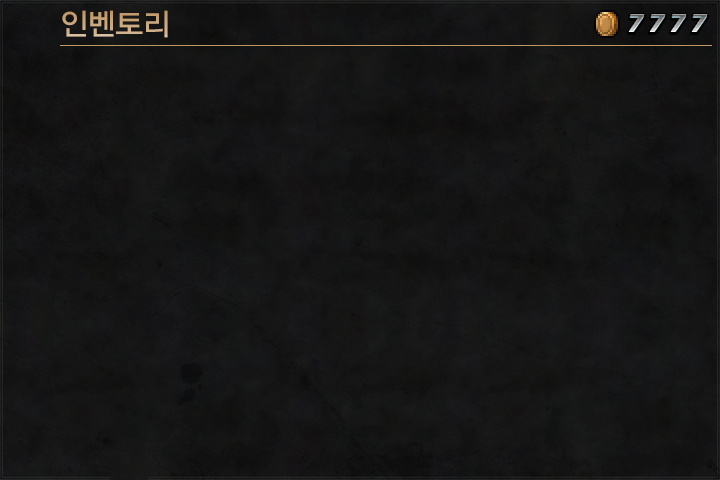
<style>
.page{position:relative;width:720px;height:480px}
.page>*{position:absolute;margin:0}
.t1{font:30px "YDIYGO330";color:#caa77e}
</style>
<div class="page">
<p class="t1" style="left:62px;top:10px;width:106px;height:28px">인벤토리</p>
</div>
